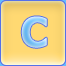
<style>
.page{position:relative;width:66px;height:66px}
.page>*{position:absolute;margin:0}
.t1{font:41px "Tahoma-Bold"}
</style>
<div class="page">
<p class="t1" style="left:21px;top:16px;width:26px;height:32px">C</p>
<p class="t1" style="left:21px;top:16px;width:26px;height:32px">C</p>
</div>
